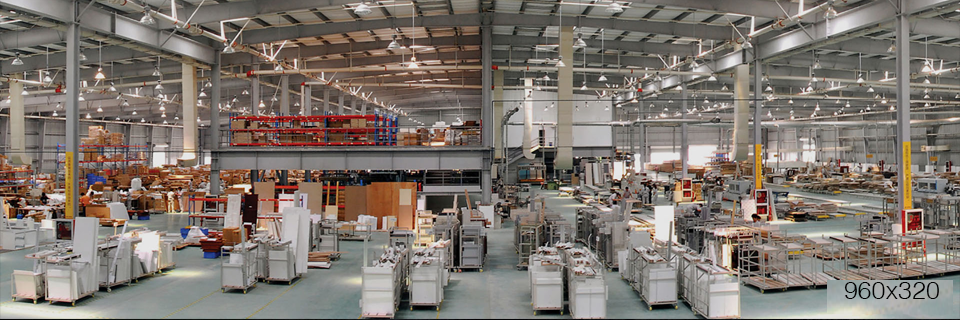
<style>
.page{position:relative;width:960px;height:320px}
.page>*{position:absolute;margin:0}
.t1{font:25px "Helvetica-Light";color:#000000}
</style>
<div class="page">
<p class="t1" style="left:844px;top:282px;width:95px;height:17px">960x320</p>
</div>
